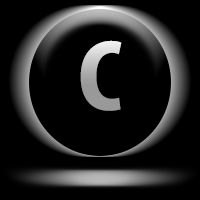
<style>
.page{position:relative;width:200px;height:200px;background:#000000}
.page>*{position:absolute;margin:0}
.t1{font:102.2px "MyriadPro-BoldCond";scale:1.09 1}
</style>
<div class="page">
<p class="t1" style="left:80px;top:40px;width:42px;height:71px">C</p>
</div>
